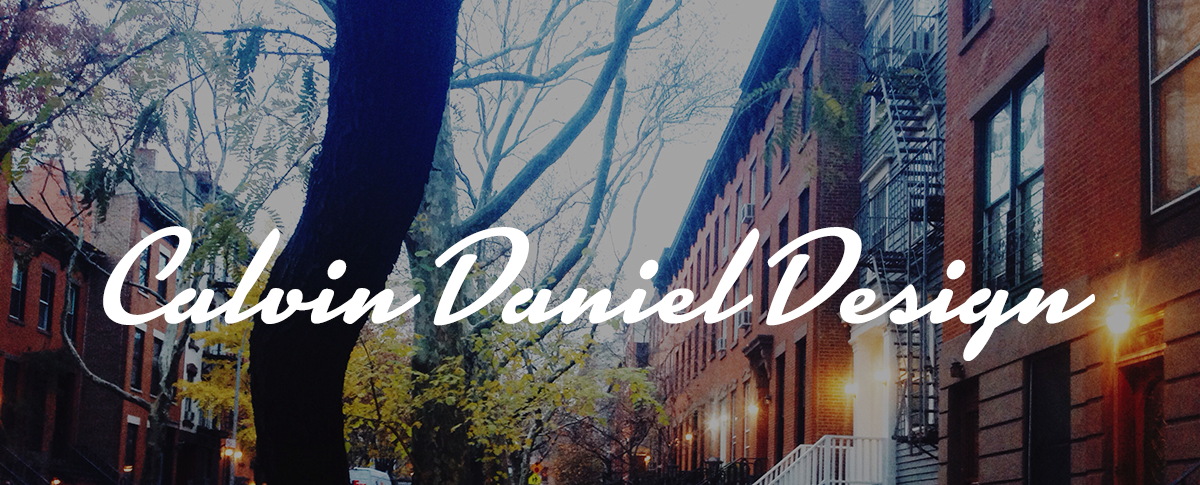
<style>
.page{position:relative;width:1200px;height:485px}
.page>*{position:absolute;margin:0}
.t1{font:132px "Kinescope";color:#ffffff}
</style>
<div class="page">
<p class="t1" style="left:103px;top:226px;width:992px;height:135px">Calvin Daniel Design</p>
</div>
